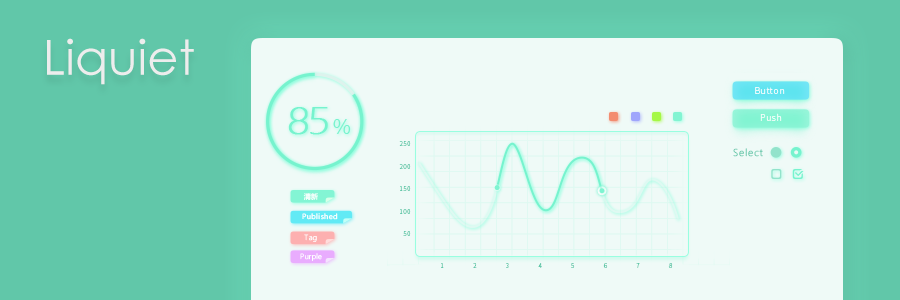
<style>
.page{position:relative;width:900px;height:300px;background:#effaf7}
.page>*{position:absolute;margin:0}
.t1{font:48.2px "CenturyGothic";letter-spacing:0.004em;color:#ededed}
.t2{font:9.1px "NotoSansHans-Light";letter-spacing:0.044em;color:#ffffff}
.t3{font:41.3px "ErasITC-Light";letter-spacing:-0.09em;color:#76f3ce;font-weight:bold}
.t4{font:21.7px "ErasITC-Medium";letter-spacing:0.05em;color:#76f3ce}
.t5{font:6.2px/22.5px "NotoSansHans-Light";letter-spacing:0.044em;color:#62c8aa}
.t6{font:9.3px "MicrosoftYaHeiLight";letter-spacing:0.084em;color:#61c7a9}
.t7{font:6.9px "MicrosoftYaHei";letter-spacing:0.05em;color:#feffff}
.t8{font:6.9px "MicrosoftYaHeiLight";letter-spacing:0.05em;color:#feffff}
.t9{font:6.2px "NotoSansHans-Light";letter-spacing:0.27em;color:#62c8aa}
</style>
<div class="page">
<p class="t1" style="left:47px;top:38px;width:147px;height:47px">Liquiet</p>
<p class="t2" style="left:755px;top:87px;width:30px;height:7px;opacity:0.85">Button</p>
<p class="t3" style="left:288px;top:107px;width:63px;height:28px">85 <span class="t4">%</span></p>
<p class="t2" style="left:760px;top:113px;width:22px;height:8px;opacity:0.85">Push</p>
<p class="t5" style="left:399px;top:141px;width:12px;height:95px;text-align:right">250<br>200<br>150<br>100<br>50</p>
<p class="t6" style="left:733px;top:148px;width:30px;height:9px">Select</p>
<p class="t7" style="left:303px;top:193px;width:15px;height:7px">清新</p>
<p class="t7" style="left:302px;top:213px;width:36px;height:7px">Published</p>
<p class="t8" style="left:304px;top:234px;width:13px;height:8px">Tag</p>
<p class="t8" style="left:300px;top:253px;width:22px;height:8px">Purple</p>
<p class="t9" style="left:441px;top:263px;width:232px;height:5px">1         2         3         4         5         6         7         8</p>
</div>
